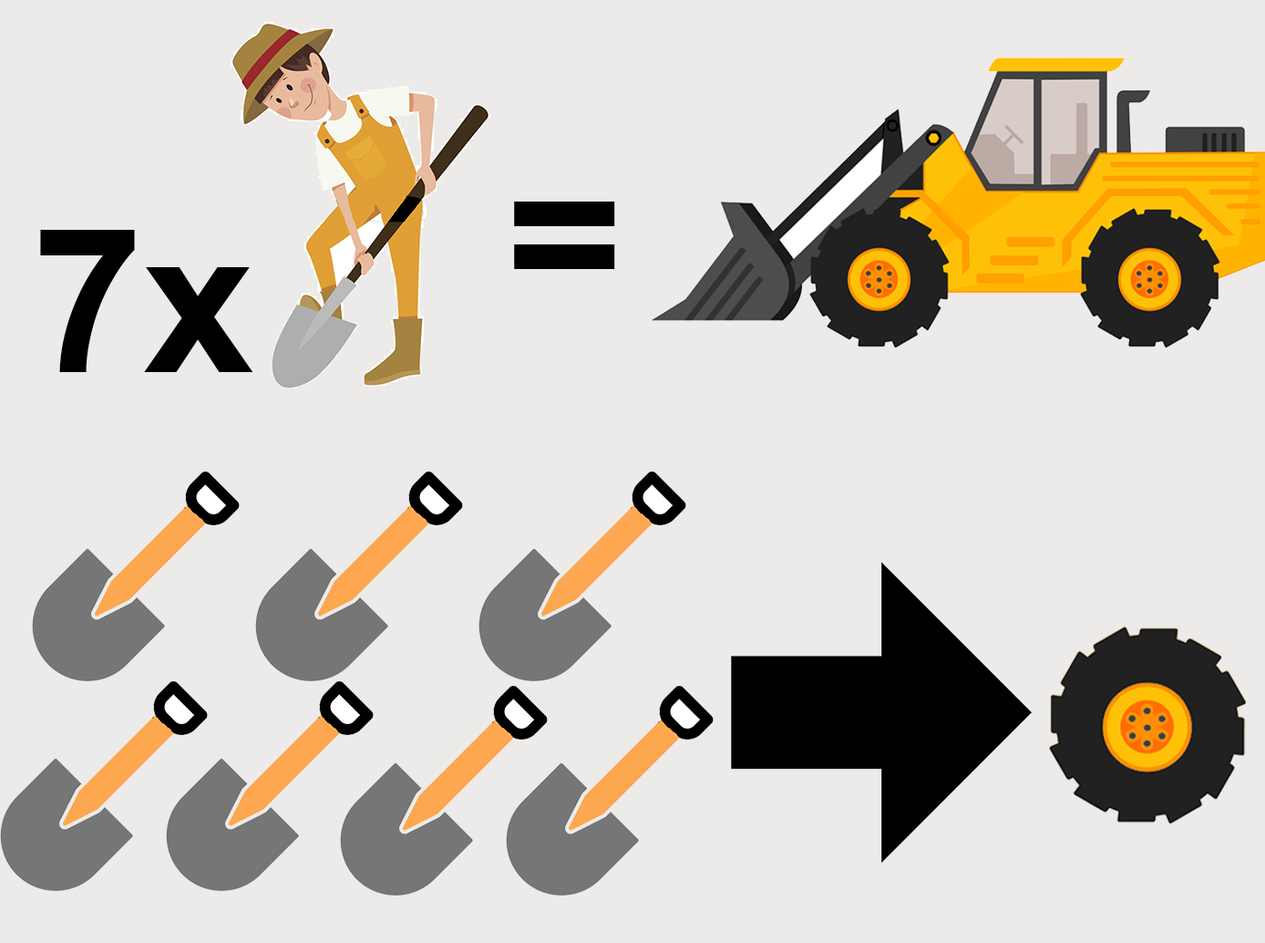
<style>
.page{position:relative;width:1265px;height:943px;background:#ecebe9}
.page>*{position:absolute;margin:0}
.t1{font:200.5px "Arial-BoldMT";color:#000000}
</style>
<div class="page">
<p class="t1" style="left:514px;top:201px;width:101px;height:68px">=</p>
<p class="t1" style="left:40px;top:230px;width:213px;height:142px">7х</p>
</div>
